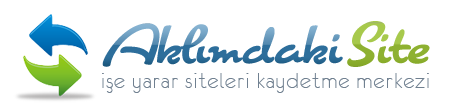
<style>
.page{position:relative;width:450px;height:111px;background:#ffffff}
.page>*{position:absolute;margin:0}
.t1{font:49px "Cuisine"}
.t2{font:25px "Eurofurencelight";letter-spacing:0.039em;color:#708090}
</style>
<div class="page">
<p class="t1" style="left:102px;top:23px;width:241px;height:44px">Aklımdaki</p>
<p class="t1" style="left:347px;top:21px;width:83px;height:46px">Site</p>
<p class="t2" style="left:102px;top:73px;width:327px;height:20px">işe yarar siteleri kaydetme merkezi</p>
</div>
